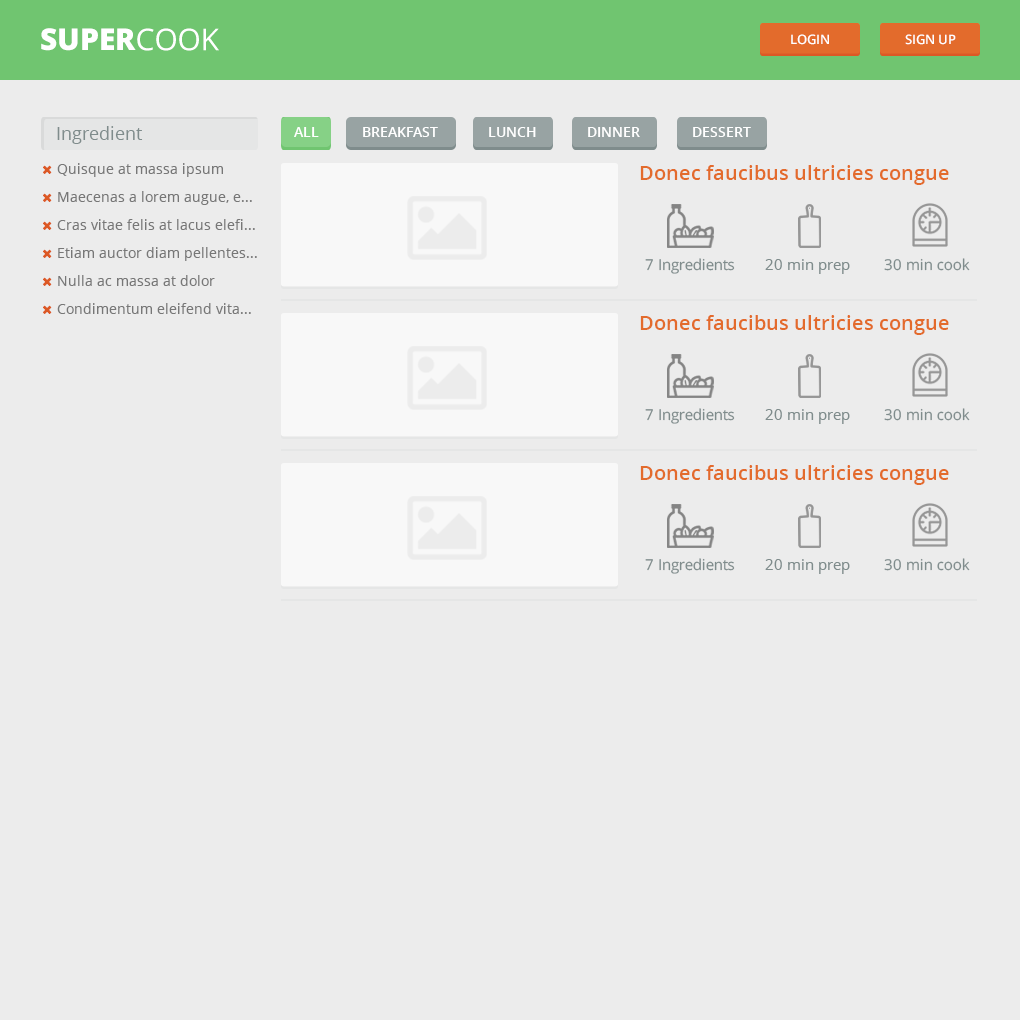
<style>
.page{position:relative;width:1020px;height:1020px;background:#ececec}
.page>*{position:absolute;margin:0}
.t1{font:30px "OpenSans-Extrabold";color:#ffffff}
.t2{font:30px "OpenSans";color:#ffffff}
.t3{font:13px "OpenSans-Semibold";color:#ffffff}
.t4{font:18px "OpenSans";color:#7f8c8c}
.t5{font:14px "OpenSans-Semibold";color:#ffffff}
.t6{font:14px/28px "OpenSans";color:#777777}
.t7{font:20px "OpenSans-Semibold";color:#e36b2c}
.t8{font:15px "OpenSans";color:#7f8c8c}
.t9{font:15.1px "OpenSans";color:#7f8c8c}
</style>
<div class="page">
<p class="t1" style="left:41px;top:28px;width:95px;height:23px">SUPER</p>
<p class="t2" style="left:137px;top:28px;width:82px;height:23px">COOK</p>
<p class="t3" style="left:791px;top:34px;width:38px;height:11px">LOGIN</p>
<p class="t3" style="left:905px;top:34px;width:51px;height:11px">SIGN UP</p>
<p class="t4" style="left:57px;top:126px;width:86px;height:18px">Ingredient</p>
<p class="t5" style="left:294px;top:127px;width:25px;height:10px">ALL</p>
<p class="t5" style="left:363px;top:127px;width:75px;height:10px">BREAKFAST</p>
<p class="t5" style="left:489px;top:127px;width:47px;height:10px">LUNCH</p>
<p class="t5" style="left:588px;top:127px;width:52px;height:10px">DINNER</p>
<p class="t5" style="left:693px;top:127px;width:58px;height:10px">DESSERT</p>
<p class="t6" style="left:57px;top:163px;width:200px;height:151px">Quisque at massa ipsum <br>Maecenas a lorem augue, e... <br>Cras vitae felis at lacus elefi... <br>Etiam auctor diam pellentes...<br>Nulla ac massa at dolor <br>Condimentum eleifend vita...</p>
<p class="t7" style="left:640px;top:165px;width:309px;height:20px">Donec faucibus ultricies congue</p>
<p class="t8" style="left:645px;top:258px;width:90px;height:16px">7 Ingredients</p>
<p class="t8" style="left:765px;top:259px;width:85px;height:15px">20 min prep</p>
<p class="t9" style="left:884px;top:258px;width:86px;height:13px">30 min cook</p>
<p class="t7" style="left:640px;top:315px;width:309px;height:20px">Donec faucibus ultricies congue</p>
<p class="t8" style="left:645px;top:408px;width:90px;height:16px">7 Ingredients</p>
<p class="t8" style="left:765px;top:409px;width:85px;height:15px">20 min prep</p>
<p class="t9" style="left:884px;top:408px;width:86px;height:13px">30 min cook</p>
<p class="t7" style="left:640px;top:465px;width:309px;height:20px">Donec faucibus ultricies congue</p>
<p class="t8" style="left:645px;top:558px;width:90px;height:16px">7 Ingredients</p>
<p class="t9" style="left:884px;top:558px;width:86px;height:13px">30 min cook</p>
<p class="t8" style="left:765px;top:559px;width:85px;height:15px">20 min prep</p>
</div>
